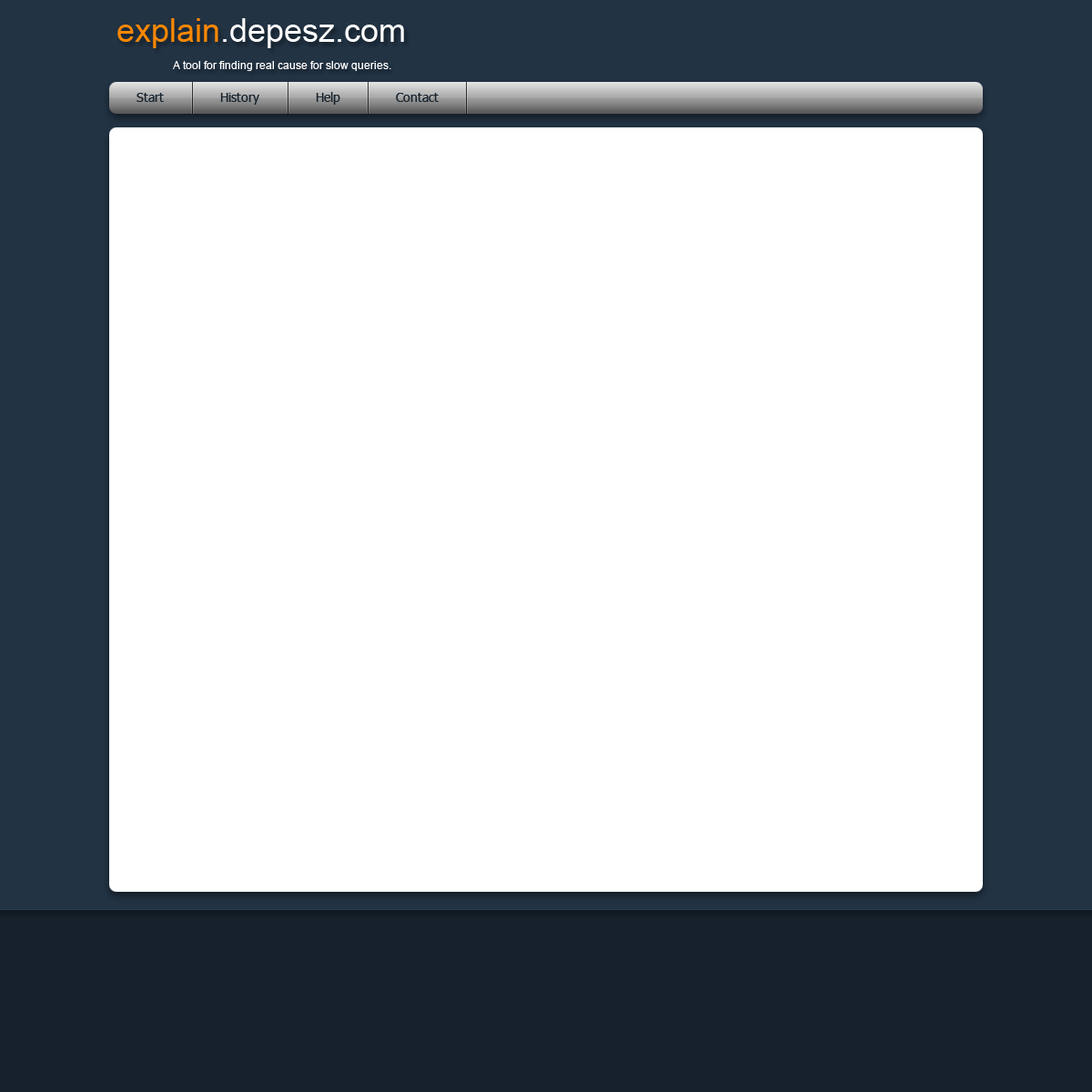
<style>
.page{position:relative;width:1092px;height:1092px;background:#ffffff}
.page>*{position:absolute;margin:0}
.t1{font:32.8px "ArialMT";color:#ffffff}
.t2{font:32.8px "ArialMT";color:#ff8800}
.t3{font:10.9px "ArialMT";color:#ffffff}
.t4{font:12.7px "Tahoma";color:#16212b}
</style>
<div class="page">
<p class="t1" style="left:117px;top:18px;width:287px;height:30px"><span class="t2">explain</span>.depesz.com</p>
<p class="t3" style="left:173px;top:61px;width:218px;height:10px">A tool for finding real cause for slow queries.</p>
<p class="t4" style="left:136px;top:93px;width:28px;height:9px">Start</p>
<p class="t4" style="left:220px;top:93px;width:39px;height:12px">History</p>
<p class="t4" style="left:316px;top:92px;width:24px;height:13px">Help</p>
<p class="t4" style="left:396px;top:93px;width:43px;height:9px">Contact</p>
</div>
